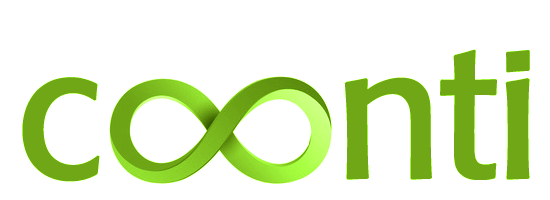
<style>
.page{position:relative;width:550px;height:200px;background:#ffffff}
.page>*{position:absolute;margin:0}
.t1{font:191px "TnTFormBSK-Regular";letter-spacing:-0.025em;color:#6fa717}
.t2{font:191px "TnTFormBSK-Regular";color:#6fa717}
</style>
<div class="page">
<p class="t1" style="left:22px;top:31px;width:508px;height:151px"><span class="t2">c    </span>nti</p>
</div>
